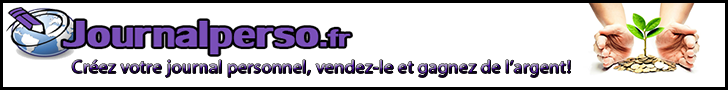
<style>
.page{position:relative;width:728px;height:90px;background:#ffffff}
.page>*{position:absolute;margin:0}
.t1{font:18px "MyriadHebrew-Regular";font-weight:bold}
</style>
<div class="page">
<p class="t1" style="left:72px;top:60px;width:499px;height:18px">Créez votre journal personnel, vendez-le et gagnez de l’argent!</p>
</div>
